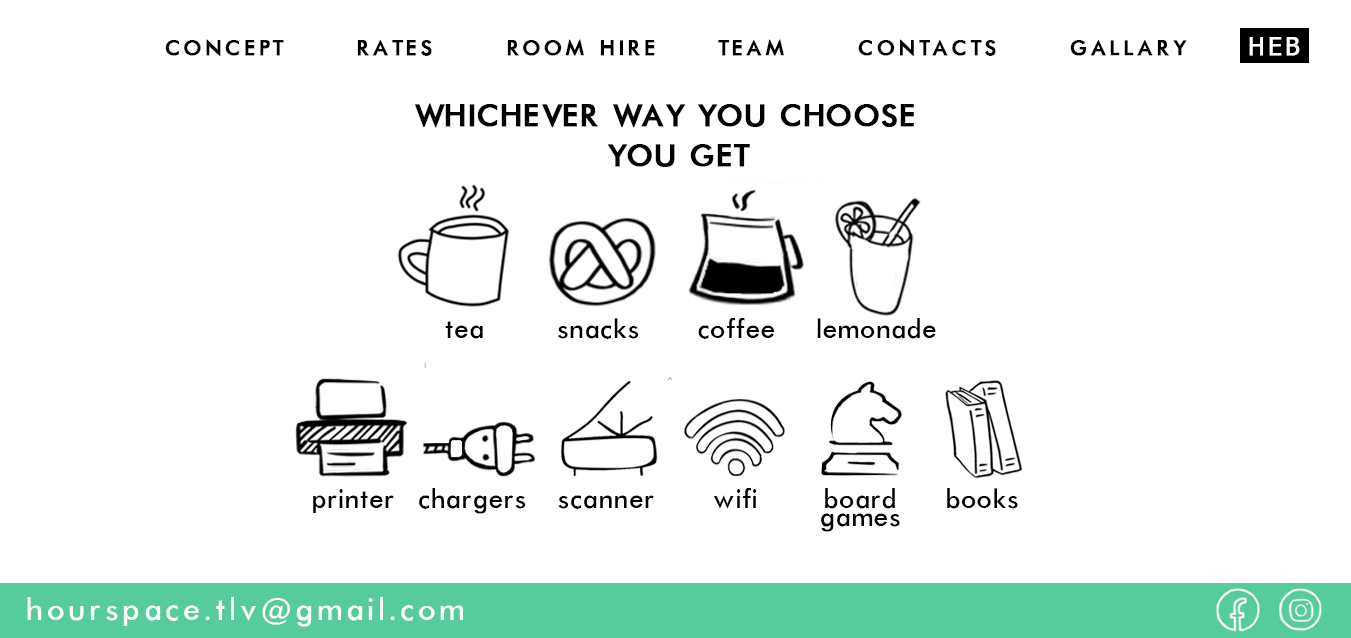
<style>
.page{position:relative;width:1351px;height:638px;background:#ffffff}
.page>*{position:absolute;margin:0}
.t1{font:24px "Futura-Normal";letter-spacing:0.12em;color:#000000;text-transform:uppercase;font-weight:bold}
.t2{font:24px "Tahoma";letter-spacing:0.12em;color:#ffffff;text-transform:uppercase;font-weight:bold}
.t3{font:35px/40px "Futura-Normal";color:#010101;text-transform:uppercase;font-weight:bold}
.t4{font:30px "Futura-Normal";letter-spacing:0.01em;color:#000000}
.t5{font:30.1px "Futura-Normal";letter-spacing:0.01em;color:#000000}
.t6{font:30.1px/18px "Futura-Normal";letter-spacing:0.01em;color:#000000}
.t7{font:35px "Futura-Normal";letter-spacing:0.1em;color:#ffffff}
</style>
<div class="page">
<p class="t1" style="left:165px;top:39px;width:1022px;height:17px">concept      rates      room hire     team      contacts      gallary</p>
<p class="t2" style="left:1249px;top:37px;width:51px;height:19px">heb</p>
<p class="t3" style="left:415px;top:103px;width:499px;height:64px;text-align:center">Whichever way you choose  <br>you get</p>
<p class="t4" style="left:558px;top:318px;width:81px;height:21px">snacks</p>
<p class="t4" style="left:698px;top:318px;width:76px;height:21px">coffee</p>
<p class="t4" style="left:817px;top:318px;width:119px;height:21px">lemonade</p>
<p class="t4" style="left:445px;top:321px;width:38px;height:18px">tea</p>
<p class="t5" style="left:313px;top:489px;width:81px;height:24px">printer</p>
<p class="t5" style="left:419px;top:488px;width:107px;height:26px">chargers</p>
<p class="t5" style="left:558px;top:495px;width:96px;height:14px">scanner</p>
<p class="t5" style="left:713px;top:488px;width:44px;height:21px">wifi</p>
<p class="t6" style="left:821px;top:488px;width:79px;height:44px;text-align:center">board<br>games</p>
<p class="t5" style="left:947px;top:488px;width:71px;height:21px">books</p>
<p class="t7" style="left:27px;top:597px;width:436px;height:30px">hourspace.tlv@gmail.com</p>
</div>
